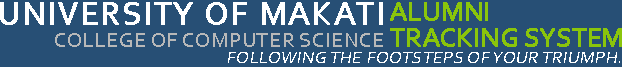
<style>
.page{position:relative;width:622px;height:67px;background:#274f75}
.page>*{position:absolute;margin:0}
.t1{font:33.3px "Corbel";letter-spacing:0.04em;color:#ffffff;text-transform:uppercase;font-weight:bold}
.t2{font:27.8px/26.4px "Corbel";letter-spacing:-0.04em;color:#8ac50b;text-transform:uppercase;font-weight:bold}
.t3{font:20.8px "Corbel";letter-spacing:0.04em;color:#b8b8b8;text-transform:uppercase}
.t4{font:16.9px "Corbel";letter-spacing:0.04em;color:#ffffff;text-transform:uppercase;font-style:italic;scale:1.04 1}
</style>
<div class="page">
<p class="t1" style="left:0px;top:2px;width:383px;height:23px">University Of mAKATI</p>
<p class="t2" style="left:390px;top:2px;width:232px;height:45px">Alumni<br>Tracking System</p>
<p class="t3" style="left:55px;top:33px;width:328px;height:14px">College of Computer Science</p>
<p class="t4" style="left:228px;top:52px;width:392px;height:11px">Following the footsteps of your triumph.</p>
</div>
